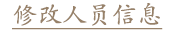
<style>
.page{position:relative;width:170px;height:30px;background:#ffffff}
.page>*{position:absolute;margin:0}
.t1{font:25px "AdobeKaitiStd-Regular";color:#978169;text-decoration:underline}
</style>
<div class="page">
<p class="t1" style="left:12px;top:3px;width:151px;height:27px">修改人员信息</p>
</div>
